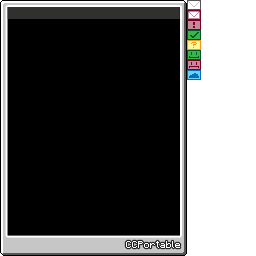
<style>
.page{position:relative;width:256px;height:256px;background:#000000}
.page>*{position:absolute;margin:0}
.t1{font:8px "Minecraft";color:#ffffff}
</style>
<div class="page">
<p class="t1" style="left:125px;top:240px;width:56px;height:9px">CCPortable</p>
</div>
